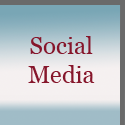
<style>
.page{position:relative;width:125px;height:125px}
.page>*{position:absolute;margin:0}
.t1{font:24px "Georgia";color:#86162b}
</style>
<div class="page">
<p class="t1" style="left:28px;top:36px;width:67px;height:47px;text-align:center">Social<br>Media</p>
</div>
